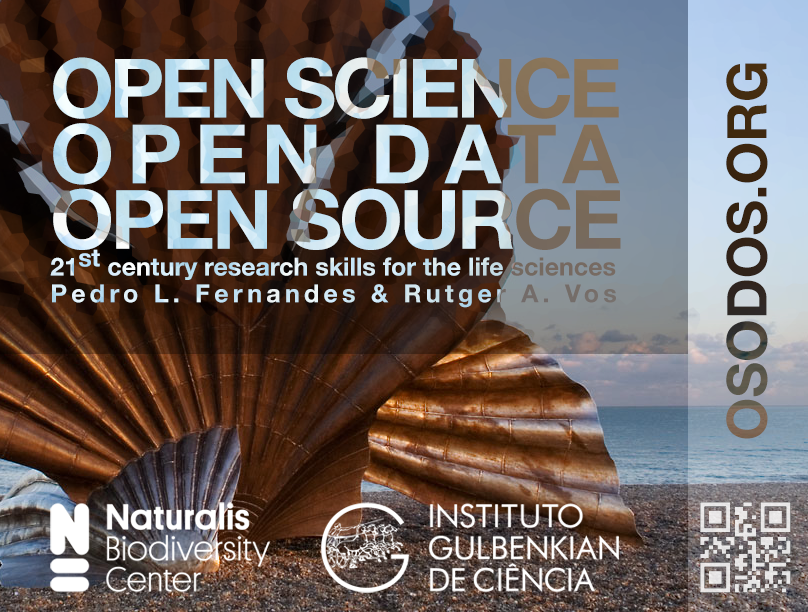
<style>
.page{position:relative;width:808px;height:612px}
.page>*{position:absolute;margin:0}
.t1{font:25px/26.7px "HelveticaNeue-Bold"}
.t2{font:82px/65.7px "HelveticaNeue-Bold";letter-spacing:-0.055em}
.t3{font:82px/65.7px "HelveticaNeue-Bold";letter-spacing:0.16em}
.t4{font:82px/65.7px "HelveticaNeue-Bold";letter-spacing:-0.04em}
.t5{font:25px/26.7px "HelveticaNeue-Bold";letter-spacing:0.17em}
.t6{font:55px "HelveticaNeue-Bold"}
</style>
<div class="page">
<p class="t1" style="left:50px;top:57px;width:571px;height:251px"><span class="t2">OPEN SCIENCE <br></span><span class="t3">OPEN DATA <br></span><span class="t4">OPEN SOURCE<br></span>21st century research skills for the life sciences<br><span class="t5">Pedro L. Fernandes &amp; Rutger A. Vos</span></p>
<p class="t6" style="left:726px;top:63px;width:42px;height:376px;rotate:-90deg">OSODOS.ORG</p>
</div>
